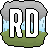
<style>
.page{position:relative;width:48px;height:48px;background:#ffffff}
.page>*{position:absolute;margin:0}
.t1{font:37px "BigNoodleTitling";letter-spacing:0.03em;color:#ffffff;font-weight:bold}
</style>
<div class="page">
<p class="t1" style="left:10px;top:9px;width:28px;height:28px">RD</p>
</div>
